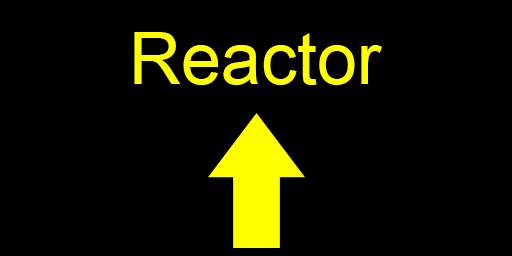
<style>
.page{position:relative;width:512px;height:256px;background:#000000}
.page>*{position:absolute;margin:0}
.t1{font:72px "ArialMT";color:#ffff00}
</style>
<div class="page">
<p class="t1" style="left:134px;top:32px;width:248px;height:53px">Reactor</p>
</div>
